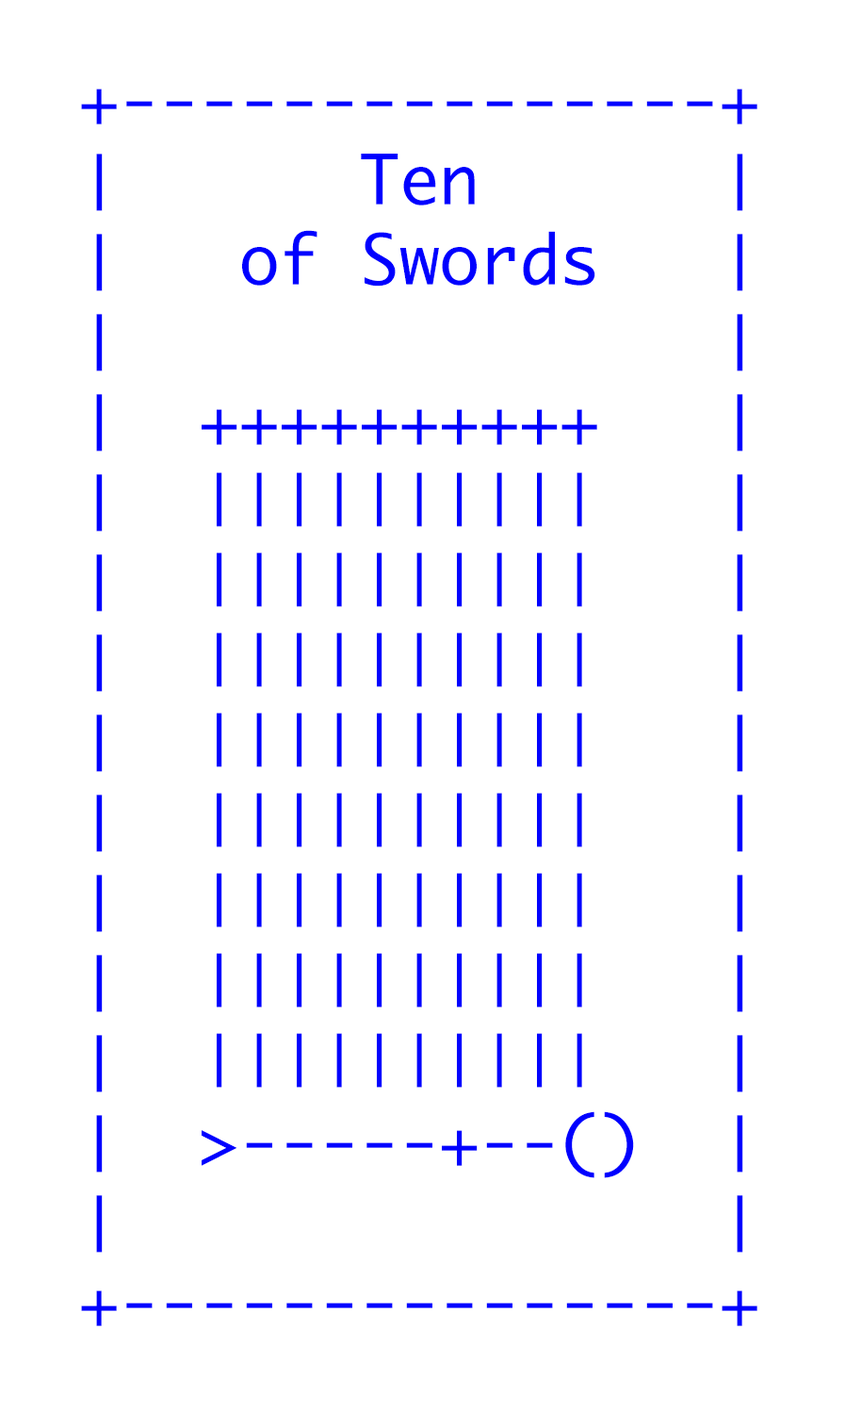
<style>
.page{position:relative;width:845px;height:1411px;background:#ffffff}
.page>*{position:absolute;margin:0}
.t1{font:66.7px "Monaco";color:#0000ff}
</style>
<div class="page">
<p class="t1" style="left:81px;top:89px;width:677px;height:1237px">+---------------+<br>│      Ten      │<br>│   of Swords   │<br>│               │<br>│  ++++++++++   │<br>│  ||||||||||   │<br>│  ||||||||||   │<br>│  ||||||||||   │<br>│  ||||||||||   │<br>│  ||||||||||   │<br>│  ||||||||||   │<br>│  ||||||||||   │<br>│  ||||||||||   │<br>│  &gt;-----+--()  │<br>│               │<br>+---------------+</p>
</div>
